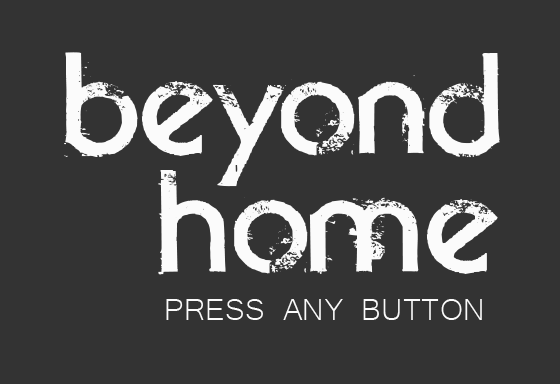
<style>
.page{position:relative;width:560px;height:384px;background:#333333}
.page>*{position:absolute;margin:0}
.t1{font:202.8px/117.7px "BeyondSky-trial";color:#fbfbfb}
.t2{font:39.4px "Microsoft-Yi-Baiti";color:#fbfbfb}
</style>
<div class="page">
<p class="t1" style="left:63px;top:52px;width:437px;height:223px;text-align:right">beyond<br>home</p>
<p class="t2" style="left:166px;top:299px;width:316px;height:21px">PRESS ANY BUTTON</p>
</div>
